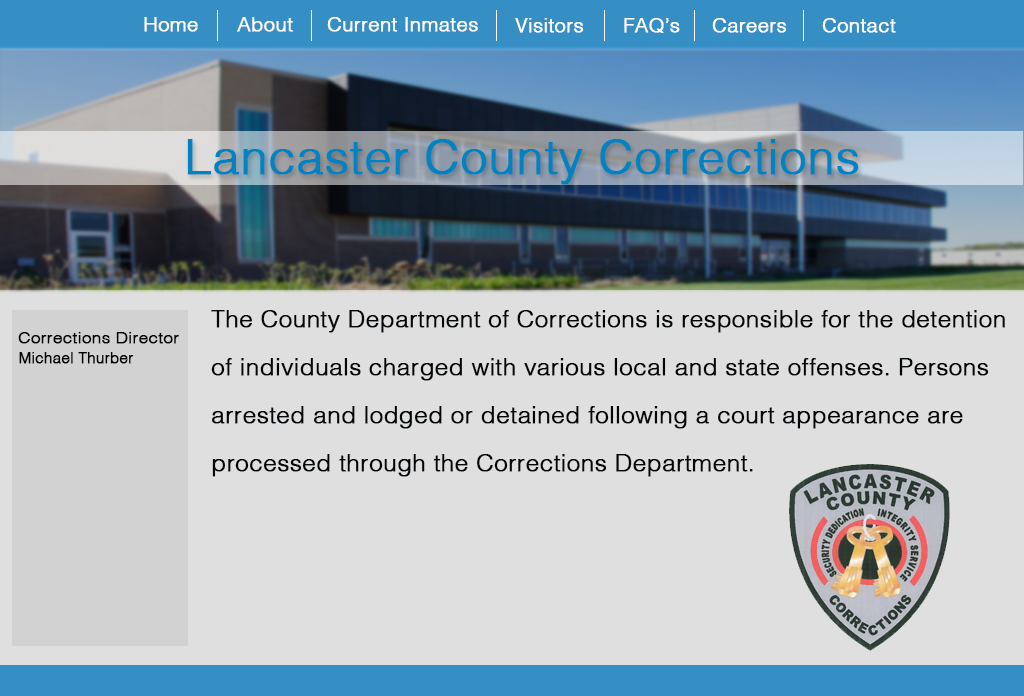
<style>
.page{position:relative;width:1024px;height:696px;background:#dfdfdf}
.page>*{position:absolute;margin:0}
.t1{font:20px "Helvetica-Light";color:#ffffff;font-weight:bold}
.t2{font:48px "Helvetica-Light";color:#0083c2;font-weight:bold}
.t3{font:24px/48px "Helvetica-Light";color:#020608;font-weight:bold}
.t4{font:15px "Helvetica-Light";color:#010304;font-weight:bold;scale:1.13 1}
.t5{font:15px "Helvetica-Light";color:#000000;font-weight:bold}
</style>
<div class="page">
<p class="t1" style="left:144px;top:17px;width:54px;height:15px">Home</p>
<p class="t1" style="left:237px;top:17px;width:56px;height:15px">About</p>
<p class="t1" style="left:327px;top:17px;width:151px;height:15px">Current Inmates</p>
<p class="t1" style="left:515px;top:18px;width:69px;height:15px">Visitors</p>
<p class="t1" style="left:624px;top:18px;width:56px;height:15px">FAQ’s</p>
<p class="t1" style="left:712px;top:18px;width:75px;height:15px">Careers</p>
<p class="t1" style="left:822px;top:18px;width:74px;height:15px">Contact</p>
<p class="t2" style="left:187px;top:139px;width:672px;height:46px">Lancaster County Corrections</p>
<p class="t3" style="left:211px;top:310px;width:794px;height:167px">The County Department of Corrections is responsible for the detention of individuals charged with various local and state offenses. Persons arrested and lodged or detained following a court appearance are processed through the Corrections Department.</p>
<p class="t4" style="left:18px;top:332px;width:161px;height:12px">Corrections Director</p>
<p class="t5" style="left:19px;top:352px;width:115px;height:12px">Michael Thurber</p>
</div>
